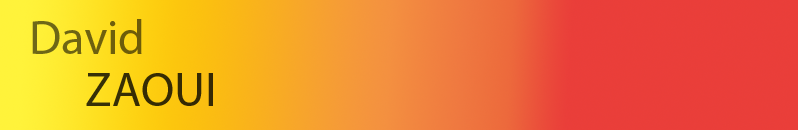
<style>
.page{position:relative;width:798px;height:130px}
.page>*{position:absolute;margin:0}
.t1{font:48px "MyriadPro-Regular";color:#6e6210}
.t2{font:48px "MyriadPro-Regular";color:#362c04}
</style>
<div class="page">
<p class="t1" style="left:32px;top:19px;width:110px;height:35px">David<br><br><br>David<br><br>dd</p>
<p class="t2" style="left:86px;top:73px;width:127px;height:33px">ZAOUI</p>
</div>
